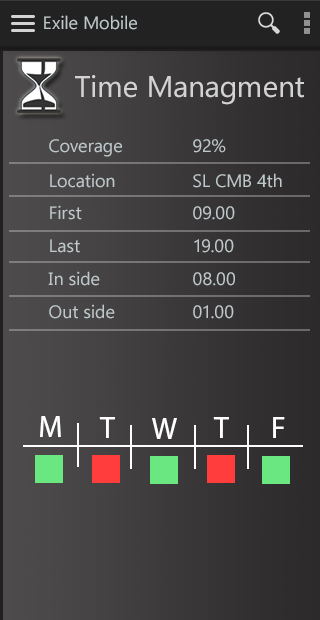
<style>
.page{position:relative;width:320px;height:620px}
.page>*{position:absolute;margin:0}
.t1{font:18px "NirmalaUI";color:#bec8cb}
.t2{font:30px "NirmalaUI";color:#d3d3d3}
.t3{font:30px "MyriadHebrew-Regular";color:#ffffff}
</style>
<div class="page">
<p class="t1" style="left:44px;top:15px;width:93px;height:15px">Exile Mobile</p>
<p class="t2" style="left:75px;top:75px;width:229px;height:30px">Time Managment</p>
<p class="t1" style="left:49px;top:139px;width:177px;height:18px">Coverage   92%</p>
<p class="t1" style="left:50px;top:173px;width:232px;height:15px">Location   SL CMB 4th</p>
<p class="t1" style="left:50px;top:205px;width:185px;height:15px">First    09.00</p>
<p class="t1" style="left:50px;top:239px;width:184px;height:14px">Last    19.00</p>
<p class="t1" style="left:48px;top:271px;width:187px;height:15px">In side   08.00</p>
<p class="t1" style="left:49px;top:304px;width:185px;height:15px">Out side   01.00</p>
<p class="t3" style="left:40px;top:416px;width:21px;height:21px">M</p>
<p class="t3" style="left:99px;top:417px;width:16px;height:21px">T</p>
<p class="t3" style="left:152px;top:418px;width:25px;height:21px">W</p>
<p class="t3" style="left:213px;top:417px;width:16px;height:21px">T</p>
<p class="t3" style="left:273px;top:417px;width:12px;height:21px">F</p>
</div>
